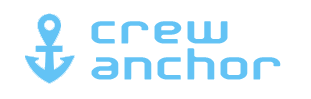
<style>
.page{position:relative;width:311px;height:99px;background:#ffffff}
.page>*{position:absolute;margin:0}
.t1{font:41.7px "NewDetroit";letter-spacing:0.01em;color:#63c3f5}
</style>
<div class="page">
<p class="t1" style="left:91px;top:21px;width:137px;height:23px">Crew</p>
<p class="t1" style="left:91px;top:48px;width:190px;height:32px">Anchor</p>
</div>
